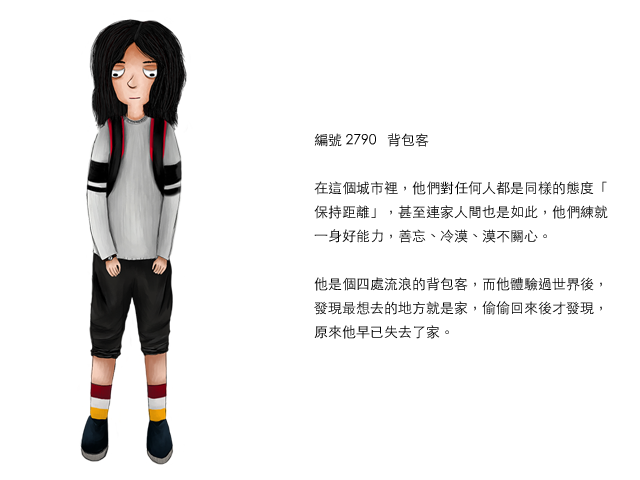
<style>
.page{position:relative;width:640px;height:480px;background:#ffffff}
.page>*{position:absolute;margin:0}
.t1{font:14px/24px "STHeitiTC-Light";color:#000000}
</style>
<div class="page">
<p class="t1" style="left:314px;top:133px;width:294px;height:206px">編號 2790   背包客<br><br>在這個城市裡，他們對任何人都是同樣的態度「保持距離」，甚至連家人間也是如此，他們練就一身好能力，善忘、冷漠、漠不關心。<br><br>他是個四處流浪的背包客，而他體驗過世界後，發現最想去的地方就是家，偷偷回來後才發現，原來他早已失去了家。</p>
</div>
